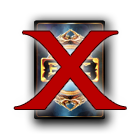
<style>
.page{position:relative;width:140px;height:140px;background:#ffffff}
.page>*{position:absolute;margin:0}
.t1{font:107.9px "FelinaGothic";letter-spacing:0.025em;color:#b90000;scale:1.19 1}
</style>
<div class="page">
<p class="t1" style="left:14px;top:31px;width:112px;height:78px">X</p>
</div>
